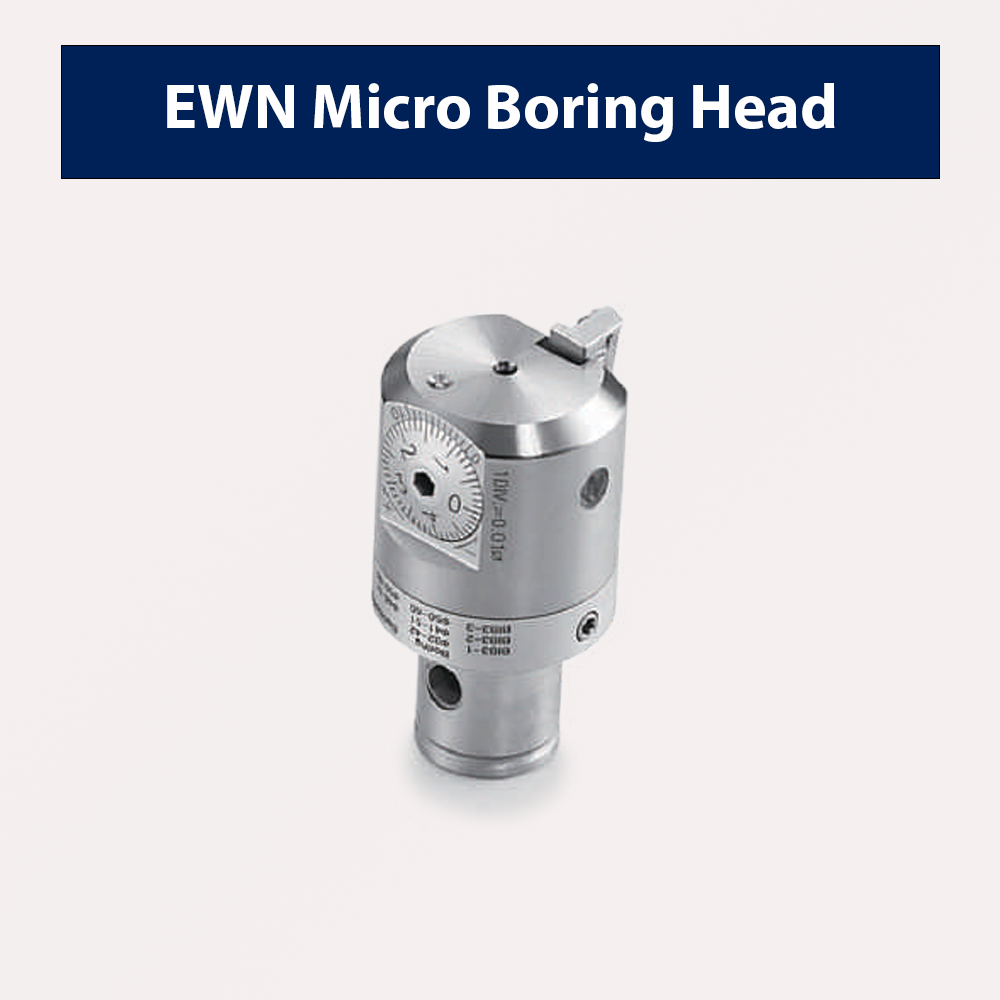
<style>
.page{position:relative;width:1000px;height:1000px;background:#f5efef}
.page>*{position:absolute;margin:0}
.t1{font:63.7px "MyriadPro-Bold";color:#ffffff}
</style>
<div class="page">
<p class="t1" style="left:167px;top:83px;width:668px;height:59px">EWN Micro Boring Head</p>
</div>
